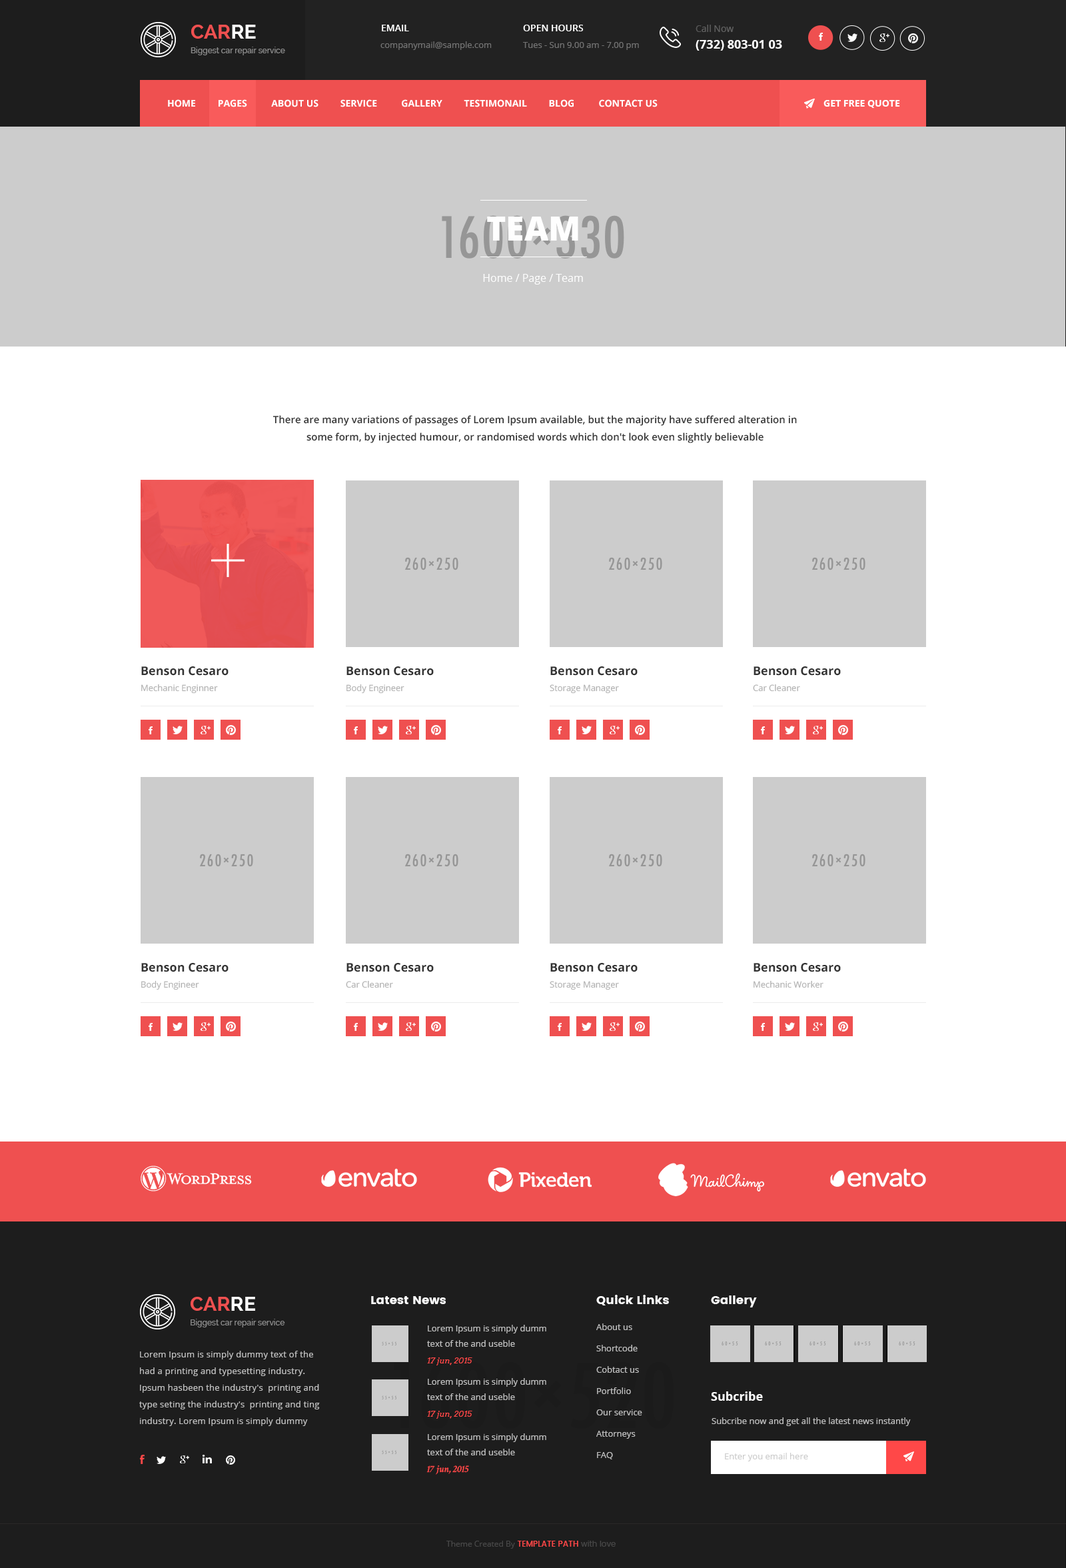
<style>
.page{position:relative;width:1066px;height:1568px;background:#ffffff}
.page>*{position:absolute;margin:0}
.t1{font:8px/14.7px "Raleway-Medium";color:#8a8a8a}
.t2{font:20px/14.7px "Raleway-Bold";color:#ef5050}
.t3{font:20px/14.7px "Raleway-Bold";color:#ffffff}
.t4{font:9.3px "OpenSans-Semibold";color:#ffffff}
.t5{font:12px/16.7px "OpenSans-Bold";color:#ffffff}
.t6{font:9.3px/16.7px "OpenSans";color:#575757}
.t7{font:9.3px/16.7px "OpenSans";color:#616161}
.t8{font:8.7px "OpenSans";color:#727272}
.t9{font:8.7px/14.7px "OpenSans";color:#727272}
.t10{font:8.7px/14.7px "Lato-Regular";color:#727272}
.t11{font:9.3px "OpenSans-Bold";color:#ffffff;text-transform:uppercase}
.t12{font:9.3px "OpenSans-Bold";color:#fefefe}
.t13{font:33.3px "OpenSans-Extrabold";color:#fefefe;text-transform:uppercase}
.t14{font:10.7px "OpenSans";color:#fefefe}
.t15{font:10px/17.3px "OpenSans-Semibold";color:#333333}
.t16{font:12px "OpenSans-Bold";color:#333333}
.t17{font:8.7px "OpenSans";color:#b1b1b1}
.t18{font:12px "Poppins";color:#ffffff}
.t19{font:8.7px/15.3px "OpenSans";color:#bebebe}
.t20{font:8px/16.7px "Arvo-Italic";color:#ff4848}
.t21{font:8.7px/21.3px "OpenSans";color:#bebebe}
.t22{font:8.7px/16.7px "OpenSans";letter-spacing:0.02em;color:#bebebe}
.t23{font:12px "OpenSans-Bold";color:#ffffff}
.t24{font:8.7px "OpenSans";color:#bebebe}
.t25{font:10px/16.7px "CrimsonText-SemiboldItalic";color:#ff4848}
.t26{font:8.7px "OpenSans";color:#cccccc}
.t27{font:8px "OpenSans";color:#474747}
.t28{font:8px "Poppins-Medium";color:#ff4848}
.t29{font:8px "Poppins-Regular";color:#474747}
</style>
<div class="page">
<p class="t1" style="left:191px;top:25px;width:94px;height:30px"><span class="t2">CAR</span><span class="t3">RE<br></span>Biggest car repair service</p>
<p class="t4" style="left:382px;top:25px;width:27px;height:6px">EMAIL</p>
<p class="t4" style="left:523px;top:25px;width:61px;height:6px">OPEN HOURS</p>
<p class="t5" style="left:696px;top:25px;width:86px;height:26px"><span class="t6">C</span><span class="t7">all Now<br></span>(732) 803-01 03</p>
<p class="t8" style="left:381px;top:41px;width:111px;height:9px">companymail@sample.com</p>
<p class="t9" style="left:523px;top:42px;width:116px;height:8px">Tues - Sun 9.00 am - 7.00 pm<br><span class="t10">Saturday &amp; Monday Closed</span></p>
<p class="t11" style="left:168px;top:99px;width:490px;height:8px">HOME         PAGES          ABOUT US         SERVICE          Gallery         TESTIMONAIL         BLOG          CONTACT US</p>
<p class="t12" style="left:824px;top:100px;width:76px;height:8px">GET FREE QUOTE</p>
<p class="t13" style="left:487px;top:217px;width:92px;height:24px">TEAM</p>
<p class="t14" style="left:483px;top:274px;width:100px;height:11px">Home / Page / Team</p>
<p class="t15" style="left:273px;top:415px;width:524px;height:28px;text-align:center">There are many variations of passages of Lorem Ipsum available, but the majority have suffered alteration in some form, by injected humour, or randomised words which don't look even slightly believable</p>
<p class="t16" style="left:141px;top:667px;width:88px;height:9px">Benson Cesaro</p>
<p class="t16" style="left:347px;top:667px;width:87px;height:9px">Benson Cesaro</p>
<p class="t16" style="left:551px;top:667px;width:87px;height:9px">Benson Cesaro</p>
<p class="t16" style="left:754px;top:667px;width:87px;height:9px">Benson Cesaro</p>
<p class="t17" style="left:141px;top:684px;width:77px;height:10px">Mechanic Enginner</p>
<p class="t17" style="left:347px;top:684px;width:58px;height:10px">Body Engineer</p>
<p class="t17" style="left:550px;top:685px;width:69px;height:9px">Storage Manager</p>
<p class="t17" style="left:753px;top:684px;width:47px;height:8px">Car Cleaner</p>
<p class="t16" style="left:141px;top:963px;width:88px;height:9px">Benson Cesaro</p>
<p class="t16" style="left:347px;top:963px;width:87px;height:9px">Benson Cesaro</p>
<p class="t16" style="left:551px;top:963px;width:87px;height:9px">Benson Cesaro</p>
<p class="t16" style="left:754px;top:963px;width:87px;height:9px">Benson Cesaro</p>
<p class="t17" style="left:141px;top:980px;width:58px;height:10px">Body Engineer</p>
<p class="t17" style="left:346px;top:980px;width:47px;height:8px">Car Cleaner</p>
<p class="t17" style="left:550px;top:981px;width:69px;height:9px">Storage Manager</p>
<p class="t17" style="left:754px;top:980px;width:70px;height:8px">Mechanic Worker</p>
<p class="t1" style="left:191px;top:1297px;width:94px;height:31px"><span class="t2">CAR</span><span class="t3">RE<br></span>Biggest car repair service</p>
<p class="t18" style="left:371px;top:1296px;width:75px;height:8px">Latest News</p>
<p class="t18" style="left:597px;top:1295px;width:72px;height:11px">Quick Links</p>
<p class="t18" style="left:711px;top:1296px;width:46px;height:12px">Gallery</p>
<p class="t19" style="left:427px;top:1325px;width:120px;height:41px">Lorem Ipsum is simply dumm<br>text of the and useble<br><span class="t20">17 jun, 2015</span></p>
<p class="t21" style="left:597px;top:1324px;width:46px;height:136px">About us<br>Shortcode<br>Cobtact us<br>Portfolio<br>Our service<br>Attorneys<br>FAQ</p>
<p class="t22" style="left:139px;top:1351px;width:181px;height:75px">Lorem Ipsum is simply dummy text of the had a printing and typesetting industry. <br>Ipsum hasbeen the industry's  printing and type seting the industry's  printing and ting industry. Lorem Ipsum is simply dummy</p>
<p class="t19" style="left:427px;top:1378px;width:120px;height:41px">Lorem Ipsum is simply dumm<br>text of the and useble<br><span class="t20">17 jun, 2015</span></p>
<p class="t23" style="left:711px;top:1392px;width:52px;height:9px">Subcribe</p>
<p class="t24" style="left:712px;top:1418px;width:199px;height:8px">Subcribe now and get all the latest news instantly</p>
<p class="t19" style="left:427px;top:1434px;width:120px;height:41px">Lorem Ipsum is simply dumm<br>text of the and useble<br><span class="t25">17 jun, 2015</span></p>
<p class="t26" style="left:725px;top:1453px;width:83px;height:9px">Enter you email here</p>
<p class="t27" style="left:447px;top:1541px;width:169px;height:8px">Theme Created By <span class="t28">TEMPLATE PATH </span><span class="t29">with love</span></p>
</div>
